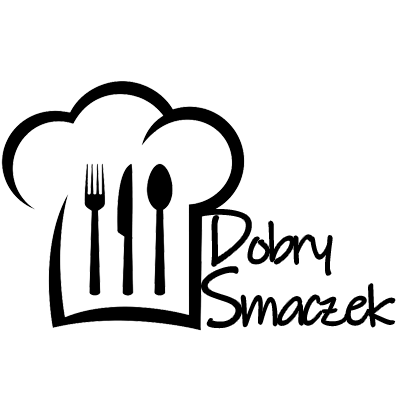
<style>
.page{position:relative;width:400px;height:400px;background:#ffffff}
.page>*{position:absolute;margin:0}
.t1{font:56.3px/61.4px "InkFree";letter-spacing:-0.075em;color:#000000}
.t2{font:81.9px/61.4px "InkFree";letter-spacing:-0.075em;color:#000000}
</style>
<div class="page">
<p class="t1" style="left:198px;top:210px;width:197px;height:118px"><span class="t2">D</span>obry<br><span class="t2">S</span>maczek</p>
</div>
